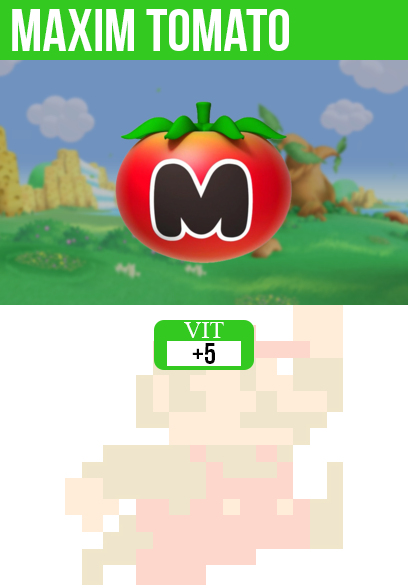
<style>
.page{position:relative;width:408px;height:585px;background:#ffffff}
.page>*{position:absolute;margin:0}
.t1{font:60px "BebasNeue";color:#ffffff}
.t2{font:24px "TimesNewRomanPSMT";color:#ffffff}
.t3{font:30px "BebasNeue";color:#000000}
</style>
<div class="page">
<p class="t1" style="left:12px;top:9px;width:277px;height:42px">maxim tomato</p>
<p class="t2" style="left:184px;top:322px;width:40px;height:16px">VIT</p>
<p class="t3" style="left:192px;top:343px;width:23px;height:21px">+5</p>
</div>
